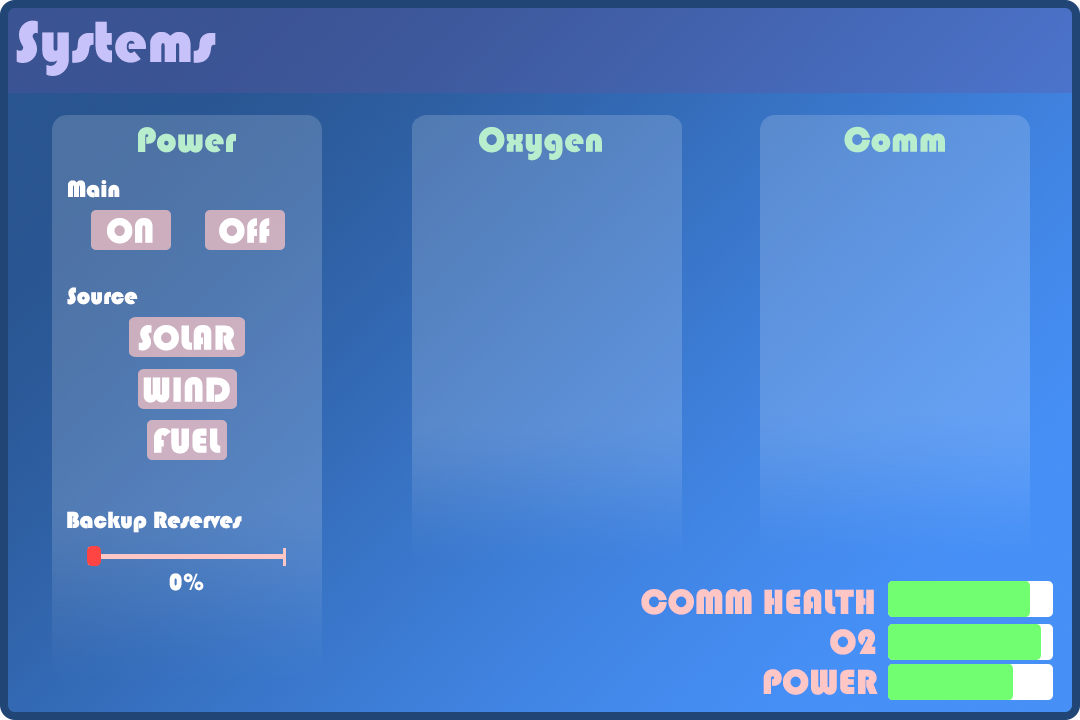
<style>
.page{position:relative;width:1080px;height:720px}
.page>*{position:absolute;margin:0}
.t1{font:60px "Bauhaus93";color:#c7c2fa}
.t2{font:36px "Bauhaus93";color:#b8edce}
.t3{font:24px "Bauhaus93";color:#ffffff}
.t4{font:36px "Bauhaus93";color:#ffffff}
.t5{font:36px "Bauhaus93";color:#ffc6c6}
</style>
<div class="page">
<p class="t1" style="left:16px;top:20px;width:200px;height:56px">Systems</p>
<p class="t2" style="left:844px;top:126px;width:101px;height:27px">Comm</p>
<p class="t2" style="left:138px;top:127px;width:98px;height:26px">Power</p>
<p class="t2" style="left:479px;top:127px;width:123px;height:34px">Oxygen</p>
<p class="t3" style="left:68px;top:180px;width:52px;height:18px">Main</p>
<p class="t4" style="left:107px;top:218px;width:46px;height:26px">ON</p>
<p class="t4" style="left:219px;top:218px;width:51px;height:26px">Off</p>
<p class="t3" style="left:67px;top:287px;width:71px;height:18px">Source</p>
<p class="t4" style="left:138px;top:325px;width:97px;height:26px">SOLAR</p>
<p class="t4" style="left:143px;top:377px;width:87px;height:26px">WIND</p>
<p class="t4" style="left:154px;top:428px;width:67px;height:26px">FUEL</p>
<p class="t3" style="left:67px;top:511px;width:175px;height:22px">Backup Reserves</p>
<p class="t3" style="left:169px;top:573px;width:35px;height:18px">0%</p>
<p class="t5" style="left:641px;top:589px;width:233px;height:26px">COMM HEALTH</p>
<p class="t5" style="left:830px;top:629px;width:46px;height:26px">O2</p>
<p class="t5" style="left:763px;top:669px;width:115px;height:26px">POWER</p>
</div>
